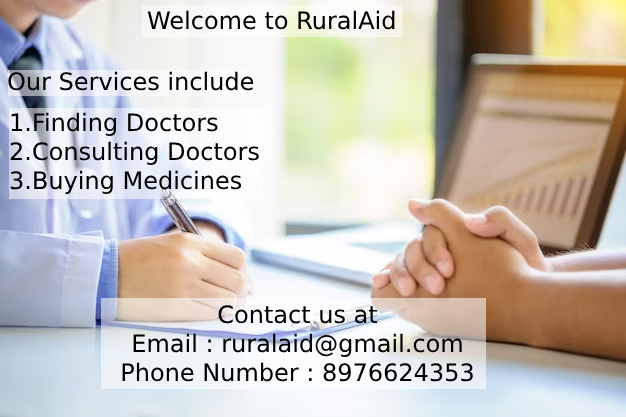
<style>
.page{position:relative;width:626px;height:417px}
.page>*{position:absolute;margin:0}
.t1{font:24px "DejaVuSans";color:#000000}
</style>
<div class="page">
<p class="t1" style="left:147px;top:10px;width:248px;height:20px">Welcome to RuralAid</p>
<p class="t1" style="left:8px;top:71px;width:246px;height:20px">Our Services include</p>
<p class="t1" style="left:10px;top:112px;width:249px;height:82px">1.Finding Doctors<br>2.Consulting Doctors<br>3.Buying Medicines</p>
<p class="t1" style="left:122px;top:305px;width:351px;height:77px;text-align:center">Contact us at<br>Email : ruralaid@gmail.com<br>Phone Number : 8976624353</p>
</div>
